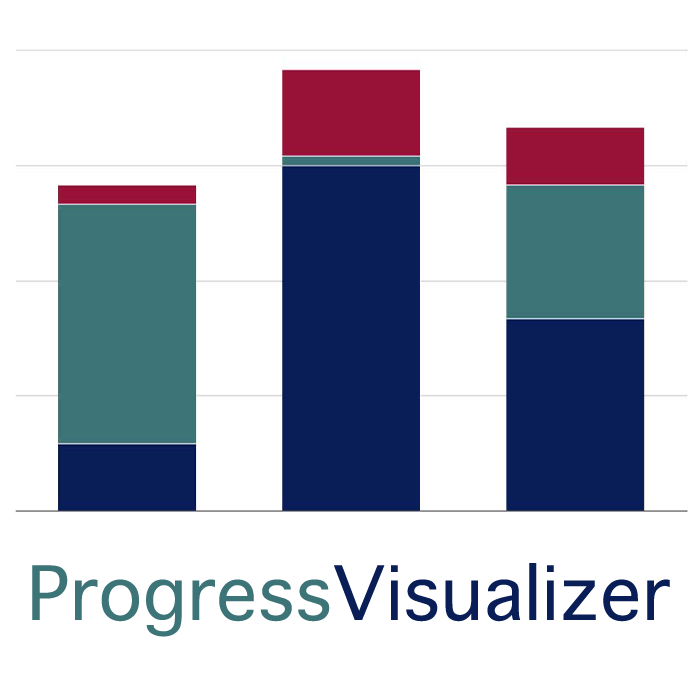
<style>
.page{position:relative;width:700px;height:700px;background:#ffffff}
.page>*{position:absolute;margin:0}
.t1{font:72px "Sathu";letter-spacing:0.01em;color:#091e57}
.t2{font:72px "Sathu";letter-spacing:0.01em;color:#3d7477}
</style>
<div class="page">
<p class="t1" style="left:32px;top:563px;width:638px;height:74px"><span class="t2">Progress</span>Visualizer</p>
</div>
